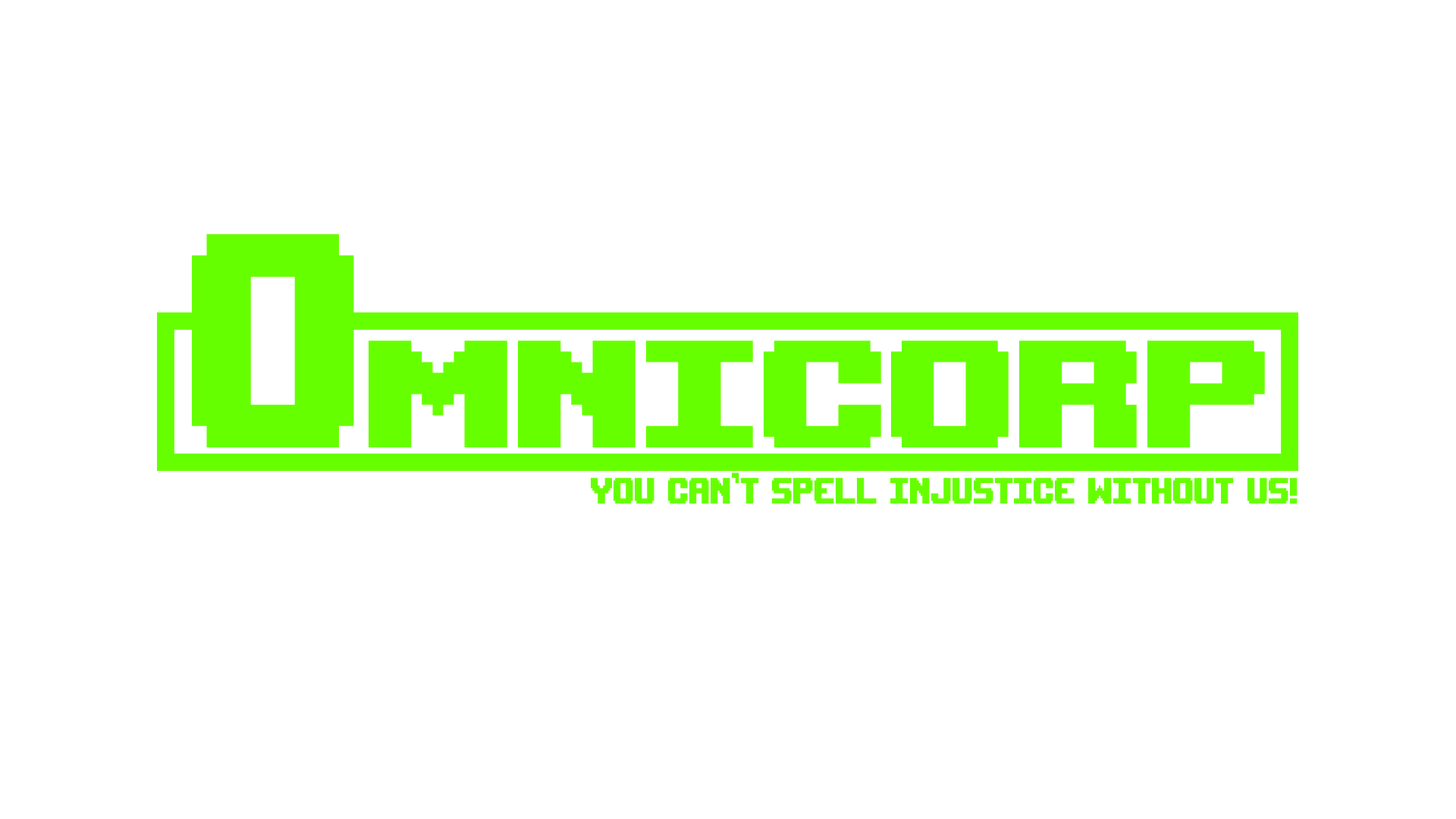
<style>
.page{position:relative;width:1456px;height:819px;background:#ffffff}
.page>*{position:absolute;margin:0}
.t1{font:227.5px "Upheaval -BRK-";color:#66ff00}
.t2{font:455px "Upheaval -BRK-";color:#66ff00;scale:0.69 1}
.t3{font:54.6px "Upheaval -BRK-";color:#66ff00;scale:0.69 1}
</style>
<div class="page">
<p class="t1" style="left:192px;top:234px;width:1073px;height:213px"><span class="t2">O</span>MNICORP</p>
<p class="t3" style="left:591px;top:472px;width:706px;height:32px">You can’t spell Injustice without us!</p>
</div>
